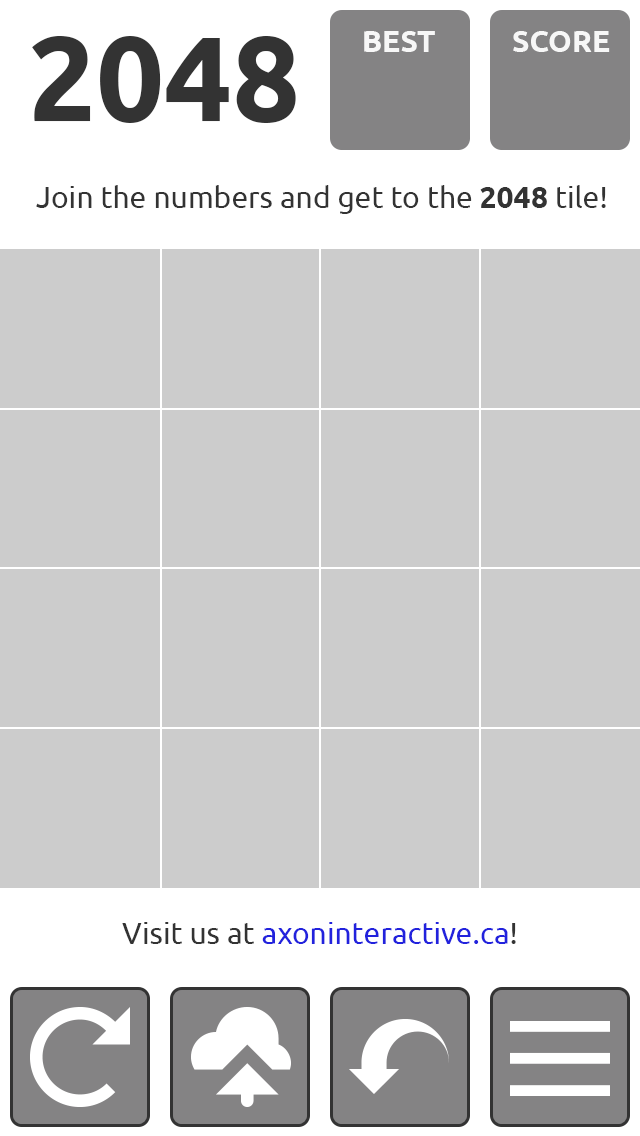
<style>
.page{position:relative;width:640px;height:1136px;background:#cccccc}
.page>*{position:absolute;margin:0}
.t1{font:120px "Ubuntu-Bold";color:#333333}
.t2{font:30px "Ubuntu-Bold";color:#f7f7f7}
.t3{font:30px "Ubuntu";color:#333333}
.t4{font:30px "Ubuntu-Bold";color:#333333}
.t5{font:30px "Ubuntu";color:#2222dd}
</style>
<div class="page">
<p class="t1" style="left:32px;top:36px;width:264px;height:87px">2048</p>
<p class="t2" style="left:364px;top:31px;width:71px;height:21px">BEST</p>
<p class="t2" style="left:513px;top:31px;width:97px;height:21px">SCORE</p>
<p class="t3" style="left:36px;top:185px;width:570px;height:29px">Join the numbers and get to the <span class="t4">2048</span> tile!</p>
<p class="t5" style="left:122px;top:922px;width:394px;height:22px"><span class="t3">Visit us at </span>axoninteractive.ca<span class="t3">!</span></p>
</div>
